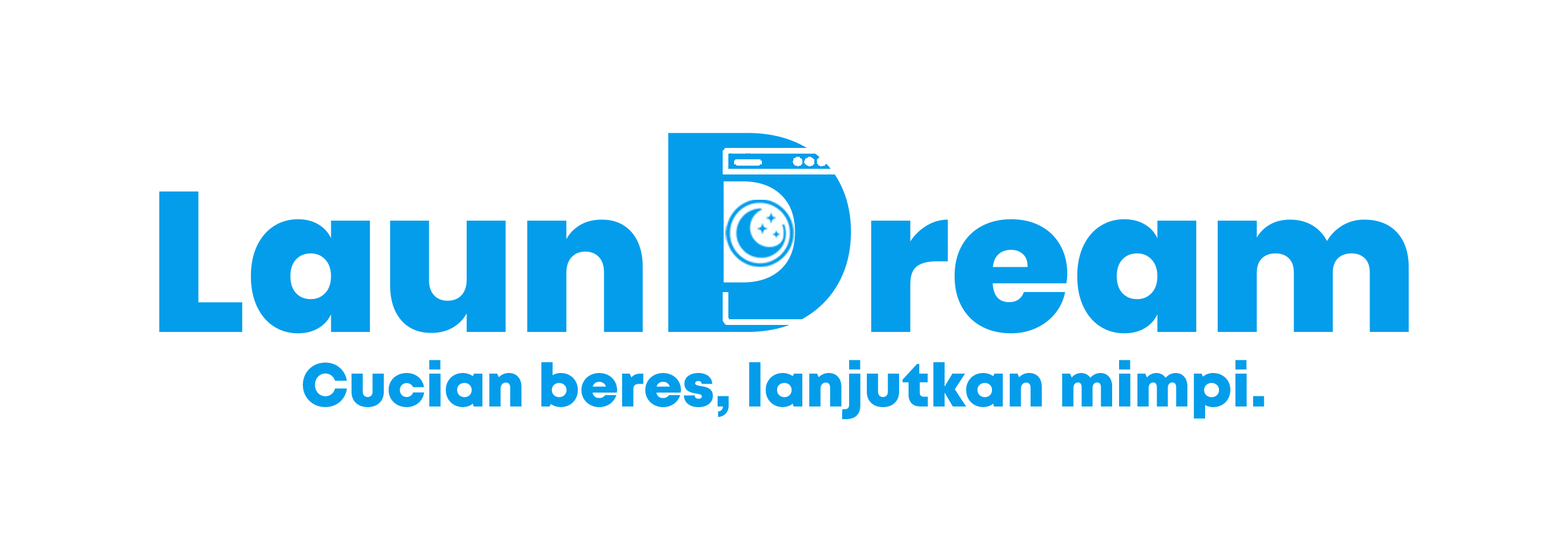
<style>
.page{position:relative;width:1568px;height:550px;background:#ffffff}
.page>*{position:absolute;margin:0}
.t1{font:60.6px "Mont-HeavyDEMO";color:#049deb}
</style>
<div class="page">
<p class="t1" style="left:303px;top:360px;width:962px;height:59px">Cucian beres, lanjutkan mimpi.</p>
</div>
